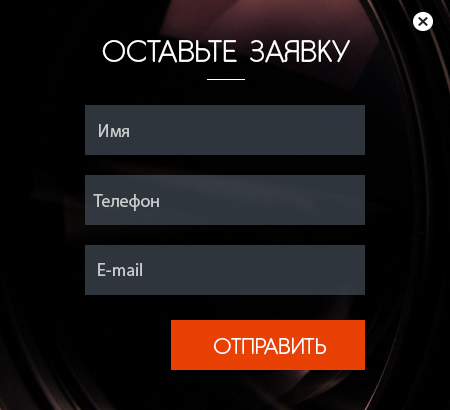
<style>
.page{position:relative;width:450px;height:410px;background:#000000}
.page>*{position:absolute;margin:0}
.t1{font:30px "GardensC";color:#ffffff;text-transform:uppercase}
.t2{font:18px "MyriadPro-Regular";color:#c8cacb}
.t3{font:18px "MyriadPro-Regular";color:#c9cacb}
.t4{font:22px "GardensC";color:#ffffff;text-transform:uppercase}
</style>
<div class="page">
<p class="t1" style="left:102px;top:39px;width:248px;height:24px">оставьте заявку</p>
<p class="t2" style="left:99px;top:124px;width:30px;height:13px">Имя</p>
<p class="t3" style="left:93px;top:194px;width:66px;height:17px">Телефон</p>
<p class="t2" style="left:98px;top:263px;width:44px;height:13px">E-mail</p>
<p class="t4" style="left:214px;top:337px;width:112px;height:18px">Отправить</p>
</div>
